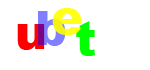
<style>
.page{position:relative;width:150px;height:70px;background:#ffffff}
.page>*{position:absolute;margin:0}
.t1{font:48px "Arial-Black"}
.t2{font:48px "Arial-Black";color:#ffff19}
.t3{font:48px "Arial-Black";color:#ff0000}
.t4{font:48px "Arial-Black";color:#00ff00}
</style>
<div class="page">
<p class="t1" style="left:38px;top:11px;width:28px;height:35px">b</p>
<p class="t2" style="left:52px;top:8px;width:30px;height:27px">e</p>
<p class="t3" style="left:17px;top:24px;width:28px;height:26px">u</p>
<p class="t4" style="left:76px;top:21px;width:19px;height:35px">t</p>
</div>
